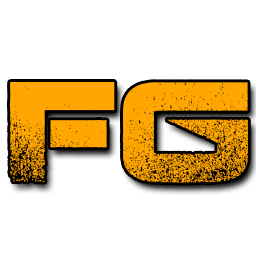
<style>
.page{position:relative;width:256px;height:256px;background:#ffffff}
.page>*{position:absolute;margin:0}
.t1{font:140px "Coalition";letter-spacing:0.025em;color:#ffa800}
</style>
<div class="page">
<p class="t1" style="left:9px;top:82px;width:239px;height:101px">FG</p>
</div>
